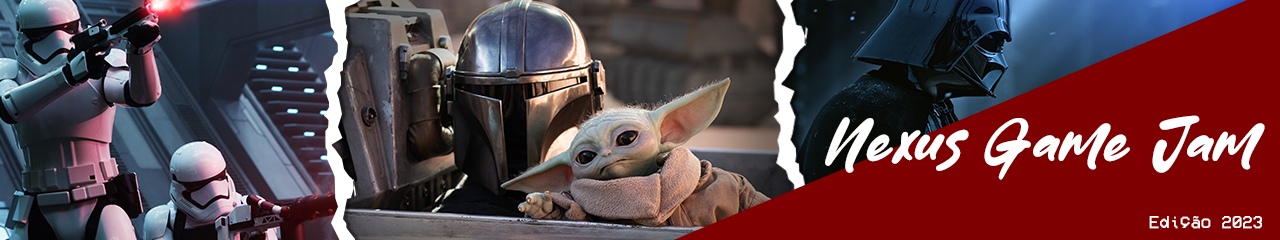
<style>
.page{position:relative;width:1280px;height:240px;background:#7f0000}
.page>*{position:absolute;margin:0}
.t1{font:68.8px "Cake-Mania";color:#ffffff}
.t2{font:17.6px "VCROSDMono";color:#ffffff}
</style>
<div class="page">
<p class="t1" style="left:825px;top:115px;width:440px;height:65px">Nexus Game Jam</p>
<p class="t2" style="left:1149px;top:216px;width:113px;height:13px">Edição 2023</p>
</div>
